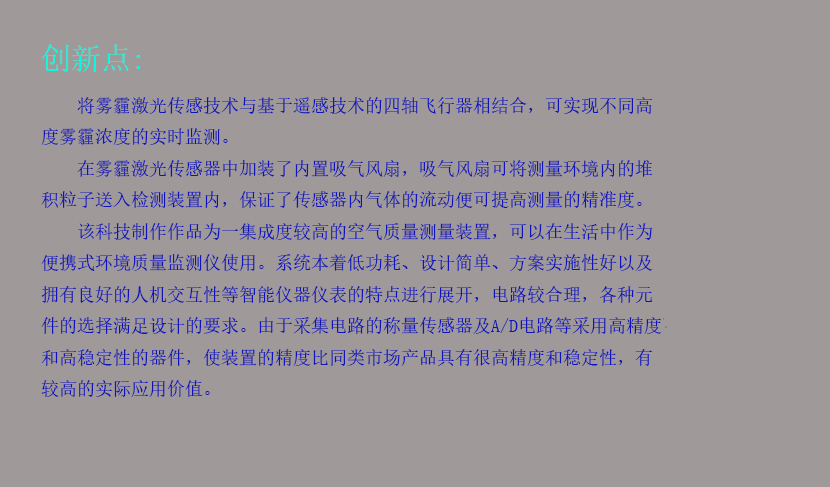
<style>
.page{position:relative;width:830px;height:487px;background:#9f9999}
.page>*{position:absolute;margin:0}
.t1{font:18px "SimSun";color:#1014b8}
.t2{font:30px "SimSun";color:#08f9df}
</style>
<div class="page">
<p class="t1" style="left:41px;top:44px;width:621px;height:353px"><span class="t2">创新点:<br> </span>将雾霾激光传感技术与基于遥感技术的四轴飞行器相结合，可实现不同高度雾霾浓度的实时监测。<br>  在雾霾激光传感器中加装了内置吸气风扇，吸气风扇可将测量环境内的堆积粒子送入检测装置内，保证了传感器内气体的流动便可提高测量的精准度。<br> 该科技制作作品为一集成度较高的空气质量测量装置，可以在生活中作为便携式环境质量监测仪使用。系统本着低功耗、设计简单、方案实施性好以及拥有良好的人机交互性等智能仪器仪表的特点进行展开，电路较合理，各种元件的选择满足设计的要求。由于采集电路的称量传感器及A/D电路等采用高精度和高稳定性的器件，使装置的精度比同类市场产品具有很高精度和稳定性，有较高的实际应用价值。</p>
</div>
